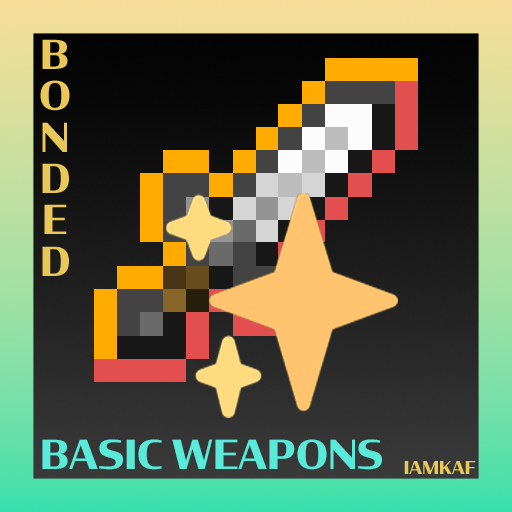
<style>
.page{position:relative;width:512px;height:512px}
.page>*{position:absolute;margin:0}
.t1{font:39.7px/41.3px "Condor-Bold";color:#eac858;text-transform:uppercase}
.t2{font:39.7px "Condor-Bold";color:#59eada;text-transform:uppercase}
.t3{font:17.6px "Condor-Bold";color:#eac858;text-transform:uppercase}
</style>
<div class="page">
<p class="t1" style="left:40px;top:39px;width:30px;height:237px;text-align:center">b<br>o<br>n<br>d<br>e<br>d</p>
<p class="t2" style="left:42px;top:439px;width:340px;height:31px">Basic weapons</p>
<p class="t3" style="left:404px;top:461px;width:72px;height:13px">iamkaf</p>
</div>
